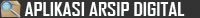
<style>
.page{position:relative;width:200px;height:18px;background:#333333}
.page>*{position:absolute;margin:0}
.t1{font:18.3px "AgencyFB-Bold";color:#fdfefe;scale:1.09 1}
</style>
<div class="page">
<p class="t1" style="left:24px;top:2px;width:161px;height:14px">APLIKASI ARSIP DIGITAL</p>
</div>
